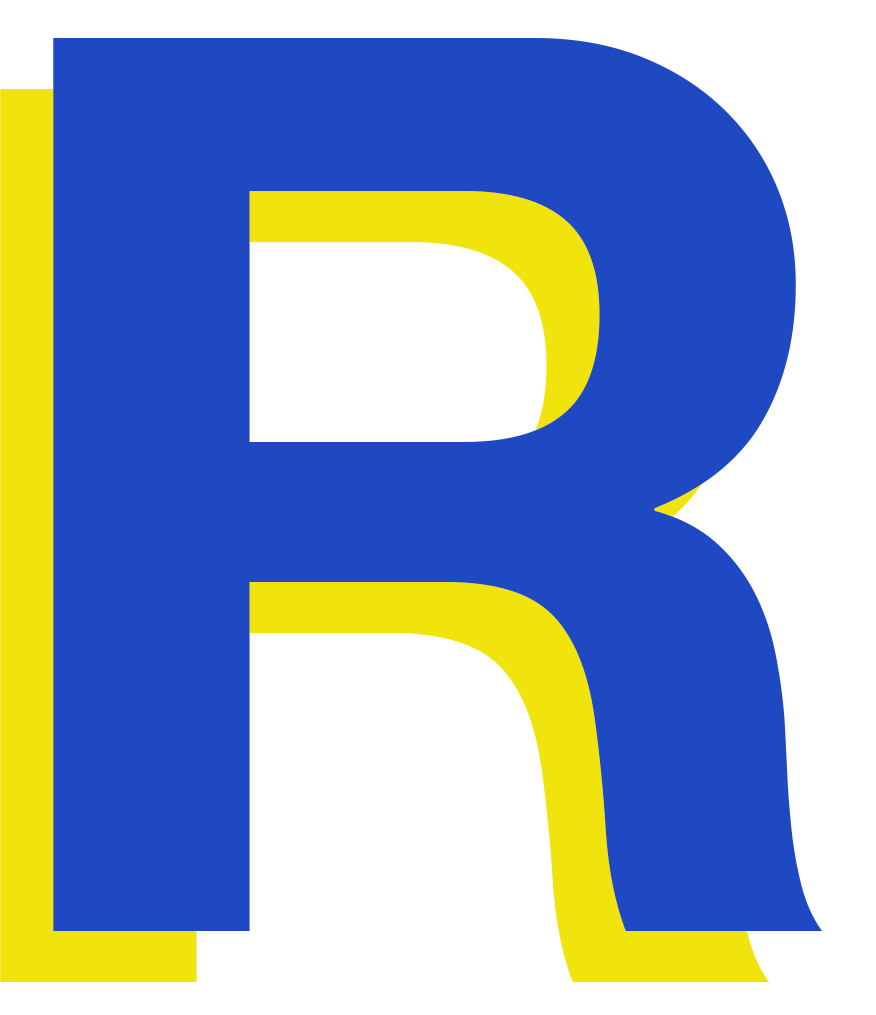
<style>
.page{position:relative;width:876px;height:1015px;background:#1e49c3}
.page>*{position:absolute;margin:0}
.t1{font:1250px "HelveticaNeue-Bold";letter-spacing:0.01em;color:#1e49c3}
</style>
<div class="page">
<p class="t1" style="left:53px;top:38px;width:769px;height:893px">R</p>
<p class="t1" style="left:0px;top:89px;width:769px;height:893px">R</p>
</div>
